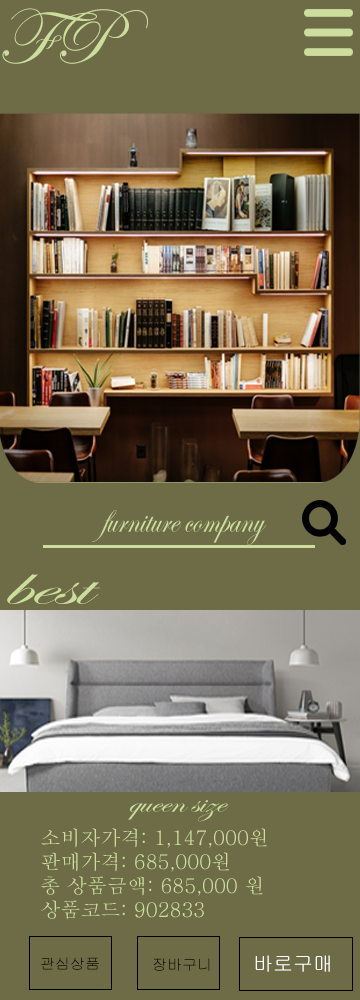
<style>
.page{position:relative;width:360px;height:1000px;background:#6e6c46}
.page>*{position:absolute;margin:0}
.t1{font:80px "EdwardianScriptITC";color:#cbde9e}
.t2{font:40.9px "EdwardianScriptITC";color:#cbde9e;scale:0.81 1}
.t3{font:58.3px "EdwardianScriptITC";color:#cbde9e;scale:1.71 1}
.t4{font:30px "EdwardianScriptITC";color:#cbde9e;scale:1.26 1}
.t5{font:20px "Batang";color:#cbde9e}
.t6{font:15px "Gulim";color:#000000}
.t7{font:20px "Gulim";color:#ffffff}
</style>
<div class="page">
<p class="t1" style="left:2px;top:8px;width:146px;height:56px">FP</p>
<p class="t2" style="left:92px;top:510px;width:174px;height:35px">furniture company</p>
<p class="t3" style="left:7px;top:574px;width:93px;height:30px">best</p>
<p class="t4" style="left:128px;top:800px;width:101px;height:22px">queen size</p>
<p class="t5" style="left:41px;top:828px;width:226px;height:91px">소비자가격: 1,147,000원<br>판매가격: 685,000원<br>총 상품금액: 685,000 원<br>상품코드: 902833</p>
<p class="t6" style="left:41px;top:957px;width:58px;height:13px">관심상품</p>
<p class="t6" style="left:153px;top:958px;width:57px;height:13px">장바구니</p>
<p class="t7" style="left:255px;top:955px;width:75px;height:17px">바로구매</p>
</div>
